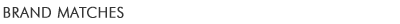
<style>
.page{position:relative;width:400px;height:24px;background:#ffffff}
.page>*{position:absolute;margin:0}
.t1{font:14.7px "FuturaBT-Light";letter-spacing:0.025em;color:#363636;text-transform:uppercase;font-weight:bold}
</style>
<div class="page">
<p class="t1" style="left:3px;top:6px;width:121px;height:12px">BRAND MATCHES</p>
</div>
